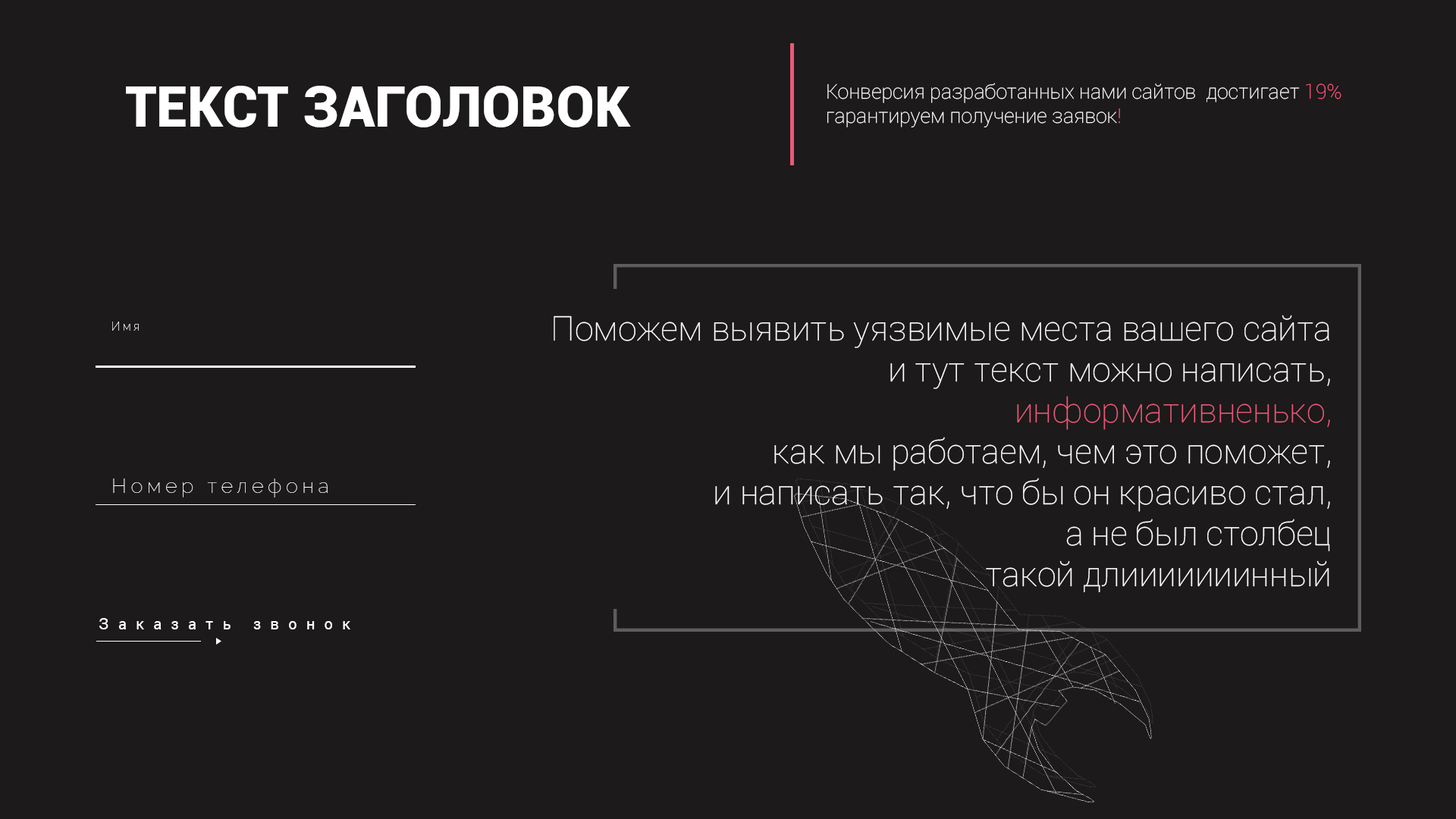
<style>
.page{position:relative;width:1456px;height:819px;background:#1c1a1a}
.page>*{position:absolute;margin:0}
.t1{font:56px "Roboto-Black";color:#ffffff}
.t2{font:20.2px "Roboto-Thin";color:#ffffff}
.t3{font:20.2px "Roboto-Thin";color:#ff557d}
.t4{font:34.1px "Roboto-Thin";color:#ffffff}
.t5{font:34.1px "Roboto-Thin";color:#eb597a}
.t6{font:12.2px "Raleway-Thin";letter-spacing:0.2em;color:#ffffff}
.t7{font:20.7px "Raleway-Thin";letter-spacing:0.2em;color:#ffffff}
.t8{font:15.9px "Roboto-Regular";letter-spacing:0.6em;color:#ffffff;scale:0.97 1}
</style>
<div class="page">
<p class="t1" style="left:126px;top:86px;width:505px;height:41px">ТЕКСТ ЗАГОЛОВОК</p>
<p class="t2" style="left:827px;top:83px;width:514px;height:44px">Конверсия разработанных нами сайтов  достигает <span class="t3">19% <br></span>гарантируем получение заявок<span class="t3">!</span></p>
<p class="t4" style="left:554px;top:315px;width:776px;height:277px;text-align:right">Поможем выявить уязвимые места вашего сайта<br>и тут текст можно написать,<br><span class="t5">информативненько,<br></span>как мы работаем, чем это поможет,<br>и написать так, что бы он красиво стал,<br>а не был столбец<br>такой длииииииинный</p>
<p class="t6" style="left:112px;top:322px;width:27px;height:9px">Имя</p>
<p class="t7" style="left:113px;top:479px;width:215px;height:18px">Номер телефона</p>
<p class="t8" style="left:99px;top:618px;width:251px;height:11px">Заказать звонок</p>
</div>
